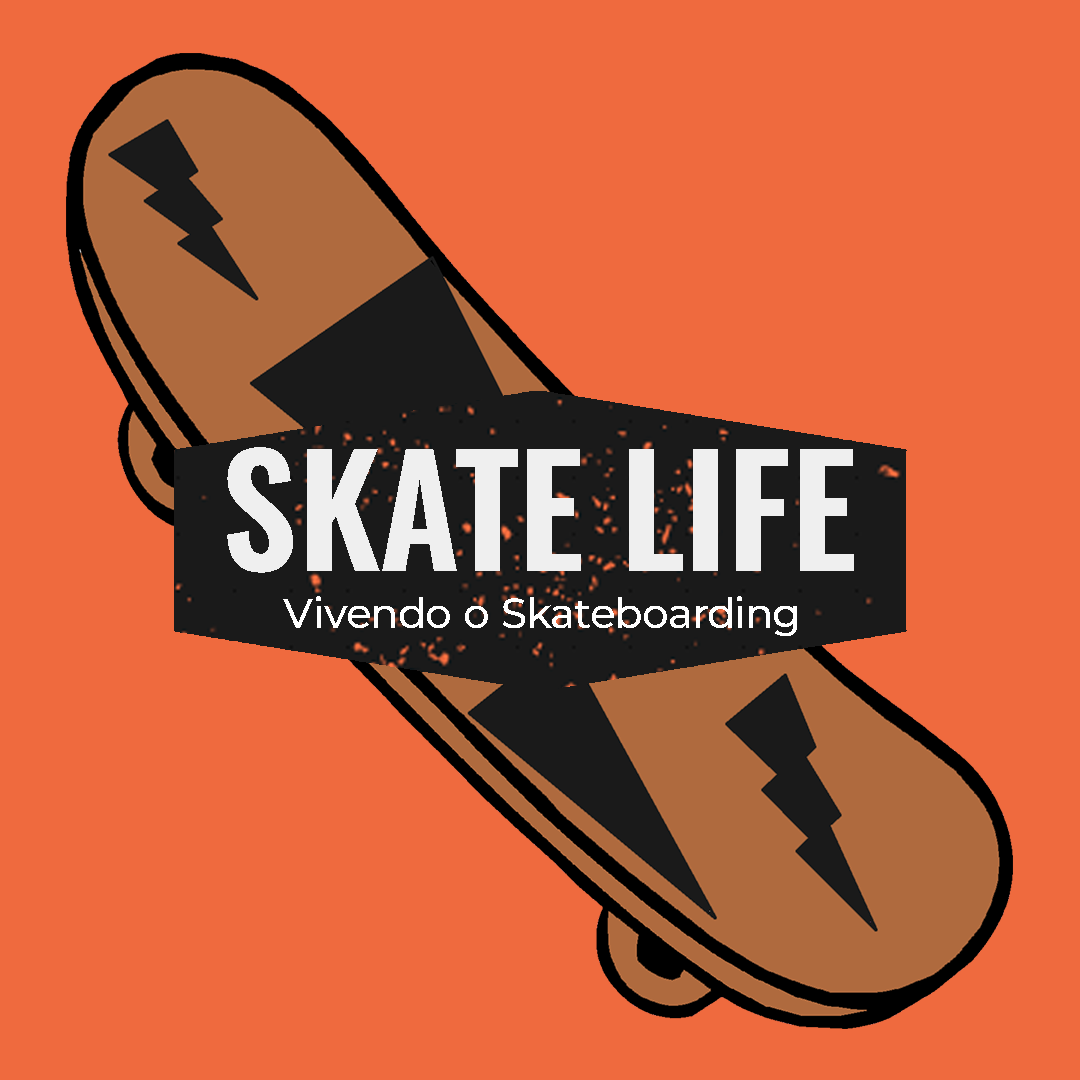
<style>
.page{position:relative;width:1080px;height:1080px;background:#ef6a3e}
.page>*{position:absolute;margin:0}
.t1{font:151px "Oswald-SemiBold";color:#efefef}
.t2{font:41.6px "Montserrat-Medium";color:#ffffff}
</style>
<div class="page">
<p class="t1" style="left:227px;top:447px;width:627px;height:126px">SKATE LIFE</p>
<p class="t2" style="left:283px;top:596px;width:514px;height:40px">Vivendo o Skateboarding</p>
</div>
